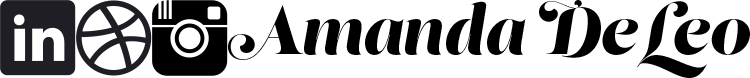
<style>
.page{position:relative;width:750px;height:78px;background:#ffffff}
.page>*{position:absolute;margin:0}
.t1{font:66.7px "LustScript";color:#000000}
</style>
<div class="page">
<p class="t1" style="left:228px;top:0px;width:522px;height:78px">Amanda DeLeo</p>
</div>
